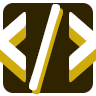
<style>
.page{position:relative;width:96px;height:96px;background:#2f2300}
.page>*{position:absolute;margin:0}
.t1{font:101.4px "CooperBlackStd";color:#ffffff;scale:0.59 1}
.t2{font:101.4px "CooperBlackStd";scale:0.59 1}
</style>
<div class="page">
<p class="t1" style="left:29px;top:4px;width:31px;height:87px">/</p>
<p class="t2" style="left:32px;top:8px;width:31px;height:87px">/</p>
</div>
